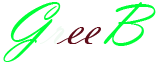
<style>
.page{position:relative;width:158px;height:65px;background:#ffffff}
.page>*{position:absolute;margin:0}
.t1{font:60px "VladimirScript";color:#5f0d1a}
.t2{font:60px "VladimirScript";color:#00ff36}
.t3{font:60px "VladimirScript";color:#f0faf2}
</style>
<div class="page">
<p class="t1" style="left:3px;top:2px;width:153px;height:60px"><span class="t2">G</span><span class="t3">r</span>ee<span class="t2">B</span></p>
</div>
